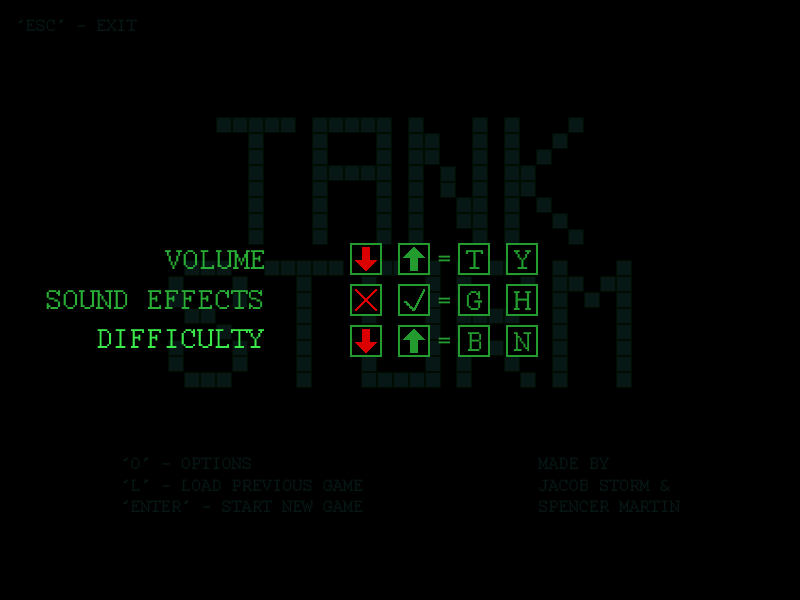
<style>
.page{position:relative;width:800px;height:600px;background:#000000}
.page>*{position:absolute;margin:0}
.t1{font:18px "Courier";color:#061716}
.t2{font:30px "Courier";color:#29af35}
.t3{font:30px "Courier";color:#3ae94a}
</style>
<div class="page">
<p class="t1" style="left:18px;top:19px;width:119px;height:12px">‘ESC’ - EXIT</p>
<p class="t2" style="left:164px;top:250px;width:101px;height:19px">VOLUME</p>
<p class="t2" style="left:46px;top:290px;width:217px;height:19px">SOUND EFFECTS</p>
<p class="t3" style="left:97px;top:329px;width:168px;height:19px">DIFFICULTY</p>
<p class="t1" style="left:123px;top:457px;width:240px;height:55px">‘O’ - OPTIONS<br>‘L’ - LOAD PREVIOUS GAME<br>‘ENTER’ - START NEW GAME</p>
<p class="t1" style="left:537px;top:457px;width:144px;height:55px">MADE BY<br>JACOB STORM &amp;<br>SPENCER MARTIN</p>
</div>
